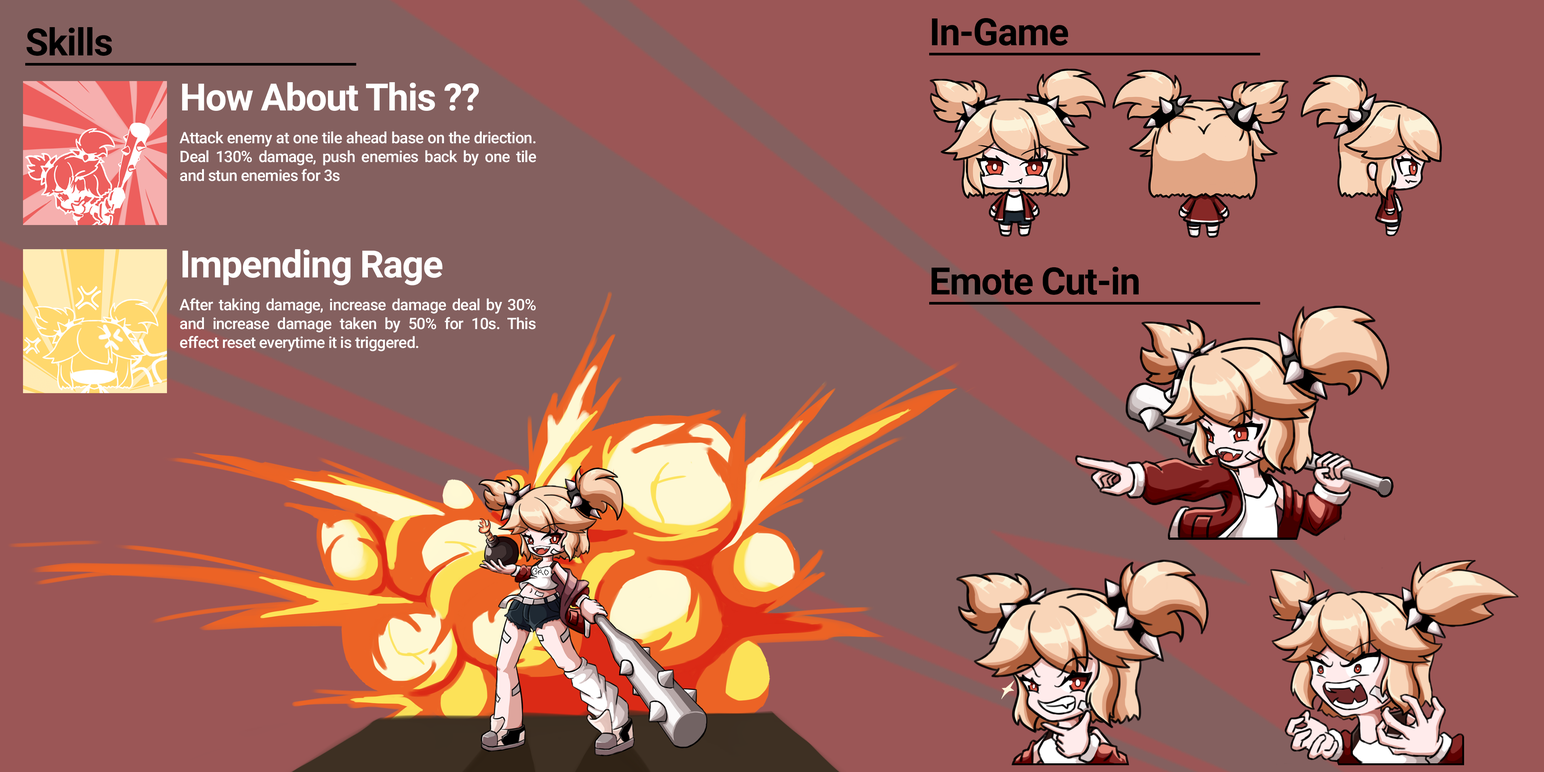
<style>
.page{position:relative;width:1544px;height:772px;background:#9b5656}
.page>*{position:absolute;margin:0}
.t1{font:37.7px "Roboto-Bold";letter-spacing:-0.025em;color:#000000}
.t2{font:37.7px "Roboto-Bold";letter-spacing:-0.025em;color:#ffffff}
.t3{font:15.7px "Roboto-Medium";letter-spacing:-0.025em;color:#ffffff}
</style>
<div class="page">
<p class="t1" style="left:26px;top:27px;width:86px;height:29px">Skills</p>
<p class="t1" style="left:932px;top:18px;width:136px;height:28px">In-Game</p>
<p class="t2" style="left:182px;top:82px;width:297px;height:29px">How About This ??</p>
<p class="t3" style="left:179px;top:131px;width:357px;height:50px;text-align:justify">Attack enemy at one tile ahead base on the driection. Deal 130% damage, push enemies back by one tile and stun enemies for 3s</p>
<p class="t2" style="left:182px;top:249px;width:261px;height:36px">Impending Rage</p>
<p class="t1" style="left:932px;top:267px;width:207px;height:28px">Emote Cut-in</p>
<p class="t3" style="left:179px;top:298px;width:357px;height:53px;text-align:justify">After taking damage, increase damage deal by 30% and increase damage taken by 50% for 10s. This effect reset everytime it is triggered.</p>
</div>
